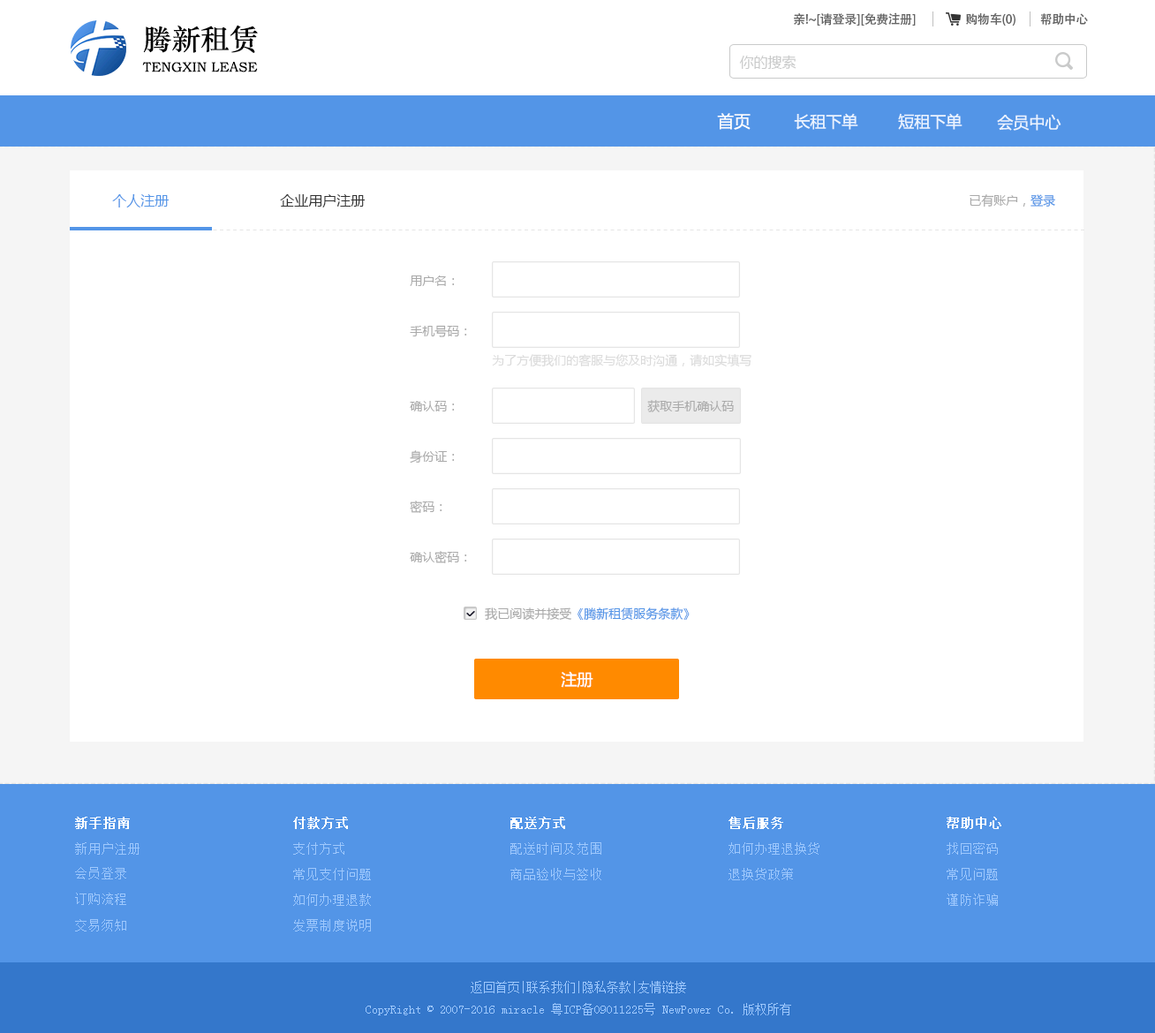
<style>
.page{position:relative;width:1155px;height:1033px;background:#ffffff}
.page>*{position:absolute;margin:0}
.t1{font:12.4px "AdobeHeitiStd-Regular";letter-spacing:-0.02em;color:#666666}
.t2{font:28.8px "STZhongsong";color:#000000}
.t3{font:13.7px "STZhongsong";color:#000000}
.t4{font:14.1px "MicrosoftYaHei";color:#c9caca}
.t5{font:16.6px "MicrosoftYaHei";color:#ffffff}
.t6{font:15.9px "MicrosoftYaHei";color:#eaf3ff}
.t7{font:14.1px "MicrosoftYaHei";color:#5395e7}
.t8{font:14.1px "MicrosoftYaHei";color:#333333}
.t9{font:12.4px "MicrosoftYaHei";color:#aaaaaa}
.t10{font:12.4px "MicrosoftYaHei";color:#5395e7}
.t11{font:12.4px "MicrosoftYaHei";color:#dbdbdb}
.t12{font:15.9px "MicrosoftYaHei";color:#fffefe}
.t13{font:13.2px "SimSun";color:#ffffff;font-weight:bold}
.t14{font:13.2px "SimSun";color:#9ec8fd}
.t15{font:12.4px "SimSun";color:#9ec8fd}
</style>
<div class="page">
<p class="t1" style="left:794px;top:12px;width:121px;height:14px">亲!~[请登录][免费注册]</p>
<p class="t1" style="left:966px;top:12px;width:49px;height:14px">购物车(0)</p>
<p class="t1" style="left:1040px;top:13px;width:48px;height:13px">帮助中心</p>
<p class="t2" style="left:143px;top:25px;width:115px;height:28px">腾新租赁</p>
<p class="t3" style="left:142px;top:62px;width:116px;height:10px">TENGXIN LEASE</p>
<p class="t4" style="left:739px;top:55px;width:57px;height:14px">你的搜索</p>
<p class="t5" style="left:717px;top:113px;width:33px;height:17px">首页</p>
<p class="t6" style="left:794px;top:113px;width:64px;height:17px">长租下单</p>
<p class="t6" style="left:898px;top:113px;width:64px;height:17px">短租下单</p>
<p class="t6" style="left:997px;top:114px;width:64px;height:17px">会员中心</p>
<p class="t7" style="left:112px;top:194px;width:57px;height:13px">个人注册</p>
<p class="t8" style="left:280px;top:194px;width:85px;height:13px">企业用户注册</p>
<p class="t9" style="left:969px;top:194px;width:86px;height:13px">已有账户，<span class="t10">登录</span></p>
<p class="t9" style="left:410px;top:275px;width:45px;height:11px">用户名：</p>
<p class="t9" style="left:410px;top:325px;width:57px;height:12px">手机号码：</p>
<p class="t11" style="left:492px;top:354px;width:259px;height:13px">为了方便我们的客服与您及时沟通，请如实填写</p>
<p class="t9" style="left:410px;top:401px;width:45px;height:10px">确认码：</p>
<p class="t9" style="left:647px;top:400px;width:87px;height:12px">获取手机确认码</p>
<p class="t9" style="left:410px;top:450px;width:45px;height:13px">身份证：</p>
<p class="t9" style="left:410px;top:500px;width:32px;height:13px">密码：</p>
<p class="t9" style="left:410px;top:551px;width:57px;height:12px">确认密码：</p>
<p class="t10" style="left:485px;top:607px;width:204px;height:14px"><span class="t9">我已阅读并接受</span>《腾新租赁服务条款》</p>
<p class="t12" style="left:561px;top:671px;width:32px;height:17px">注册</p>
<p class="t13" style="left:75px;top:817px;width:55px;height:12px">新手指南</p>
<p class="t13" style="left:293px;top:817px;width:55px;height:12px">付款方式</p>
<p class="t13" style="left:510px;top:817px;width:55px;height:12px">配送方式</p>
<p class="t13" style="left:728px;top:817px;width:55px;height:12px">售后服务</p>
<p class="t13" style="left:946px;top:817px;width:55px;height:12px">帮助中心</p>
<p class="t14" style="left:75px;top:842px;width:64px;height:12px">新用户注册</p>
<p class="t14" style="left:293px;top:842px;width:51px;height:12px">支付方式</p>
<p class="t14" style="left:510px;top:842px;width:91px;height:12px">配送时间及范围</p>
<p class="t14" style="left:728px;top:842px;width:91px;height:12px">如何办理退换货</p>
<p class="t14" style="left:946px;top:842px;width:51px;height:12px">找回密码</p>
<p class="t14" style="left:75px;top:867px;width:51px;height:12px">会员登录</p>
<p class="t14" style="left:293px;top:868px;width:78px;height:12px">常见支付问题</p>
<p class="t14" style="left:510px;top:868px;width:91px;height:12px">商品验收与签收</p>
<p class="t14" style="left:728px;top:868px;width:65px;height:12px">退换货政策</p>
<p class="t14" style="left:946px;top:868px;width:51px;height:12px">常见问题</p>
<p class="t14" style="left:75px;top:892px;width:51px;height:13px">订购流程</p>
<p class="t14" style="left:293px;top:893px;width:78px;height:13px">如何办理退款</p>
<p class="t14" style="left:946px;top:893px;width:51px;height:13px">谨防诈骗</p>
<p class="t14" style="left:75px;top:919px;width:51px;height:12px">交易须知</p>
<p class="t14" style="left:293px;top:919px;width:78px;height:12px">发票制度说明</p>
<p class="t15" style="left:365px;top:981px;width:426px;height:34px;text-align:center">返回首页|联系我们|隐私条款|友情链接<br>CopyRight © 2007-2016 miracle 粤ICP备09011225号 NewPower Co. 版权所有</p>
</div>
